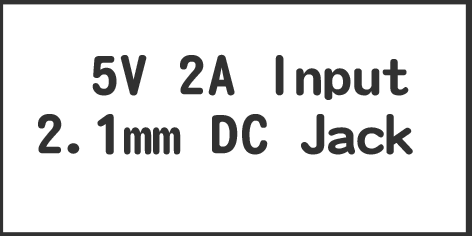
<style>
.page{position:relative;width:472px;height:236px;background:#ffffff}
.page>*{position:absolute;margin:0}
.t1{font:58.3px "DFYuan-W8-WIN-BF";color:#313131}
</style>
<div class="page">
<p class="t1" style="left:92px;top:54px;width:317px;height:46px">5V 2A Input</p>
<p class="t1" style="left:38px;top:114px;width:375px;height:41px">2.1mm DC Jack</p>
</div>
